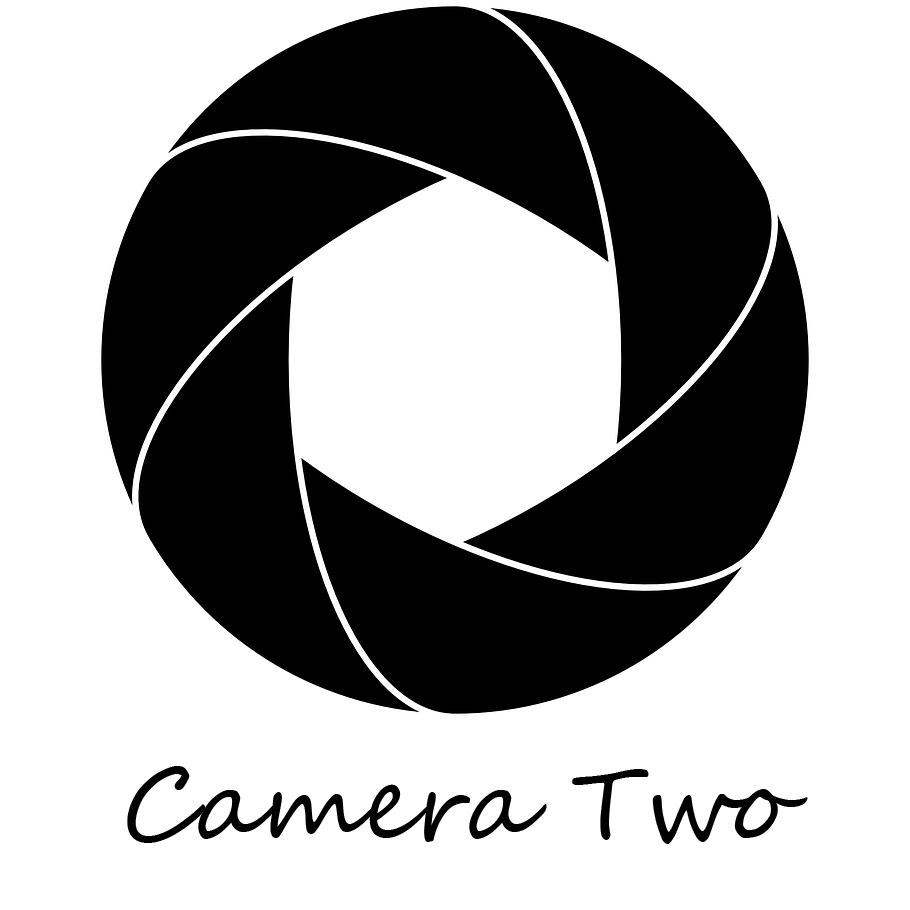
<style>
.page{position:relative;width:910px;height:910px;background:#ffffff}
.page>*{position:absolute;margin:0}
.t1{font:100px "SegoeScript";color:#000000}
</style>
<div class="page">
<p class="t1" style="left:127px;top:766px;width:681px;height:78px">Camera Two</p>
</div>
